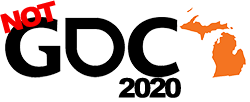
<style>
.page{position:relative;width:250px;height:102px;background:#ffffff}
.page>*{position:absolute;margin:0}
.t1{font:27px "Arial-Black";letter-spacing:-0.1em;color:#f80000}
.t2{font:27px "Arial-Black";letter-spacing:-0.1em;color:#000000}
</style>
<div class="page">
<p class="t1" style="left:0px;top:0px;width:56px;height:34px;rotate:-15deg">NOT</p>
<p class="t2" style="left:118px;top:77px;width:63px;height:21px">2020</p>
</div>
